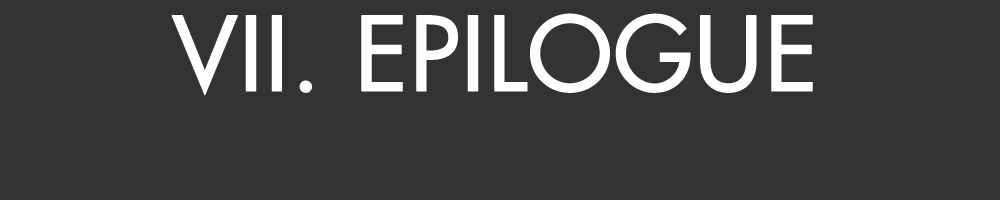
<style>
.page{position:relative;width:1000px;height:200px;background:#333333}
.page>*{position:absolute;margin:0}
.t1{font:100px "Futura";color:#ffffff;font-weight:bold}
</style>
<div class="page">
<p class="t1" style="left:171px;top:13px;width:642px;height:83px">VII. EPILOGUE</p>
</div>
